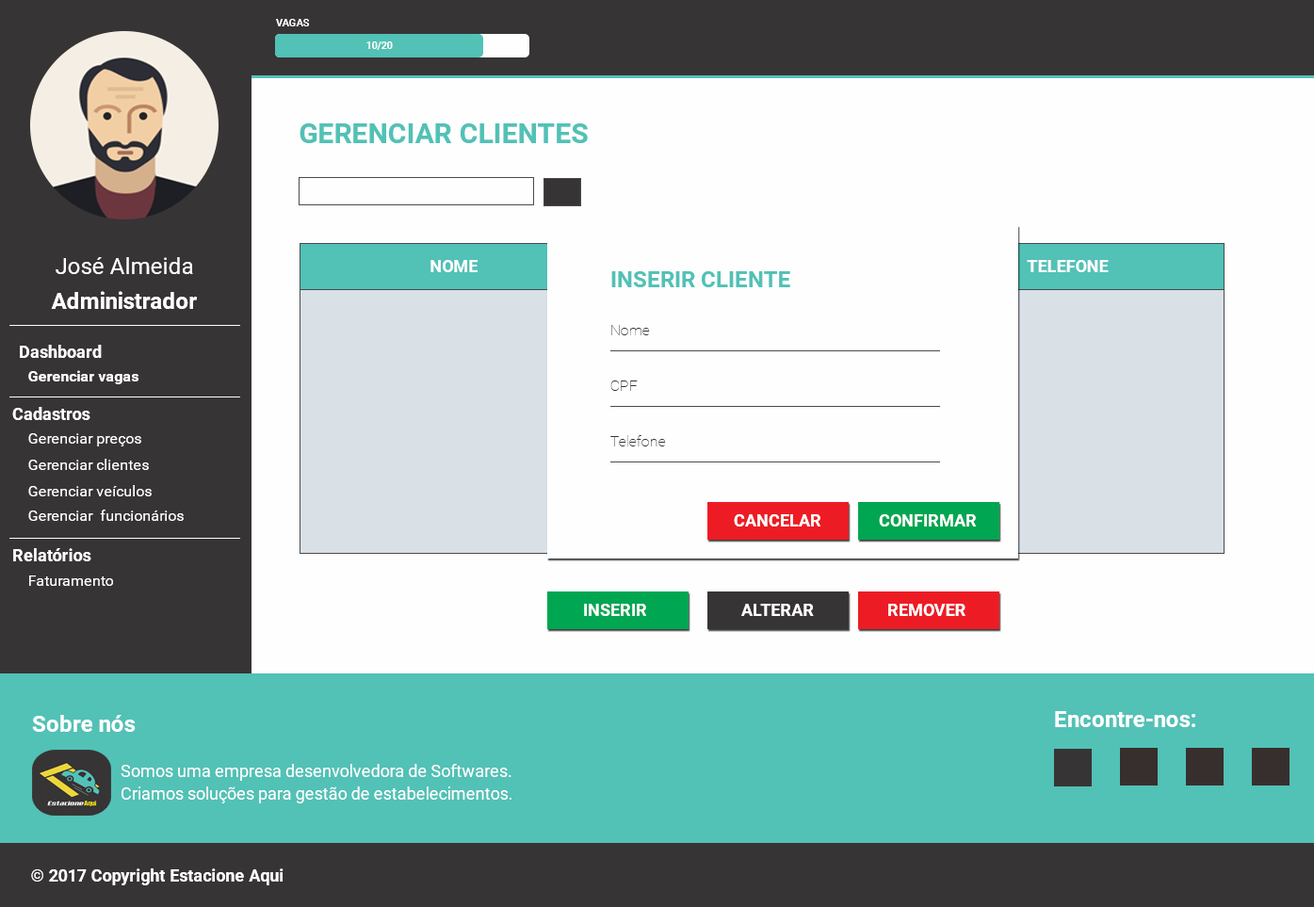
<style>
.page{position:relative;width:1314px;height:907px;background:#fefefe}
.page>*{position:absolute;margin:0}
.t1{font:10.4px "Roboto-Bold";color:#fefefe;text-transform:uppercase}
.t2{font:10.4px "Roboto-Bold";color:#fefefe}
.t3{font:28.3px "Roboto-Bold";color:#52c1b6;text-transform:uppercase}
.t4{font:22.6px "Roboto-Regular";color:#fefefe}
.t5{font:17px "Roboto-Bold";color:#fefefe;text-transform:uppercase}
.t6{font:22.6px "Roboto-Bold";color:#52c1b6;text-transform:uppercase}
.t7{font:22.6px "Roboto-Bold";color:#fefefe}
.t8{font:15.1px "Roboto-Thin";color:#373435}
.t9{font:17px "Roboto-Bold";color:#fefefe}
.t10{font:15.1px "Roboto-Bold";color:#fefefe}
.t11{font:15.1px "Roboto-Regular";color:#fefefe}
.t12{font:17px/22.6px "Roboto-Regular";color:#fefefe}
</style>
<div class="page">
<p class="t1" style="left:276px;top:19px;width:33px;height:7px">Vagas</p>
<p class="t2" style="left:366px;top:41px;width:27px;height:9px">10/20</p>
<p class="t3" style="left:300px;top:123px;width:288px;height:20px">gerenciar clientes</p>
<p class="t4" style="left:56px;top:257px;width:137px;height:17px">José Almeida</p>
<p class="t5" style="left:431px;top:260px;width:47px;height:12px">nOME</p>
<p class="t5" style="left:1027px;top:260px;width:82px;height:12px">TELEFONE</p>
<p class="t6" style="left:611px;top:271px;width:179px;height:16px">INSERIR CLIENTE</p>
<p class="t7" style="left:51px;top:291px;width:146px;height:18px">Administrador</p>
<p class="t8" style="left:611px;top:325px;width:39px;height:10px">Nome</p>
<p class="t9" style="left:20px;top:345px;width:82px;height:13px">Dashboard</p>
<p class="t10" style="left:28px;top:370px;width:110px;height:14px">Gerenciar vagas</p>
<p class="t8" style="left:611px;top:381px;width:27px;height:10px">CPF</p>
<p class="t9" style="left:12px;top:407px;width:78px;height:13px">Cadastros</p>
<p class="t11" style="left:28px;top:433px;width:113px;height:14px">Gerenciar preços</p>
<p class="t8" style="left:611px;top:435px;width:55px;height:12px">Telefone</p>
<p class="t11" style="left:28px;top:459px;width:121px;height:11px">Gerenciar clientes</p>
<p class="t11" style="left:28px;top:485px;width:124px;height:12px">Gerenciar veículos</p>
<p class="t11" style="left:28px;top:510px;width:156px;height:11px">Gerenciar  funcionários</p>
<p class="t5" style="left:734px;top:514px;width:87px;height:13px">CancelaR</p>
<p class="t5" style="left:879px;top:514px;width:97px;height:13px">Confirmar</p>
<p class="t9" style="left:13px;top:548px;width:78px;height:14px">Relatórios</p>
<p class="t11" style="left:29px;top:576px;width:84px;height:10px">Faturamento</p>
<p class="t5" style="left:584px;top:604px;width:62px;height:12px">INSERIR</p>
<p class="t5" style="left:741px;top:604px;width:73px;height:12px">ALTERAR</p>
<p class="t5" style="left:888px;top:604px;width:78px;height:12px">REMOVER</p>
<p class="t7" style="left:1055px;top:711px;width:141px;height:16px">Encontre-nos:</p>
<p class="t7" style="left:32px;top:715px;width:104px;height:17px">Sobre nós</p>
<p class="t12" style="left:121px;top:764px;width:391px;height:40px">Somos uma empresa desenvolvedora de Softwares. Criamos soluções para gestão de estabelecimentos.</p>
<p class="t9" style="left:31px;top:869px;width:253px;height:17px">© 2017 Copyright Estacione Aqui</p>
</div>
